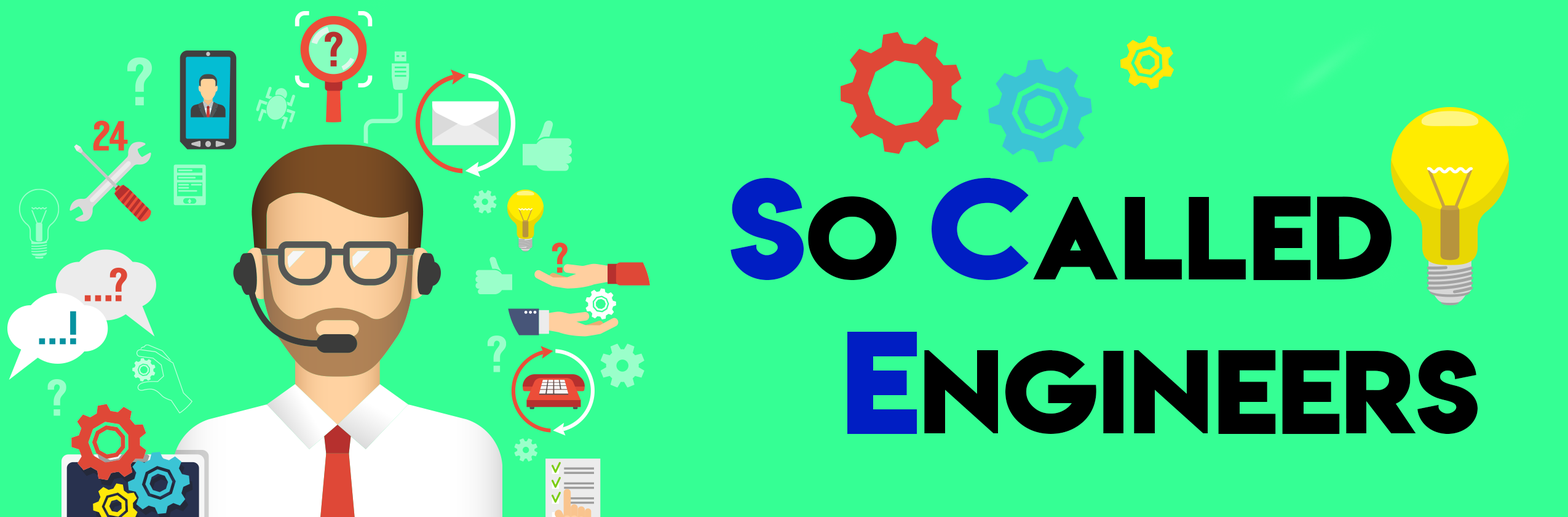
<style>
.page{position:relative;width:1568px;height:517px;background:#35ff94}
.page>*{position:absolute;margin:0}
.t1{font:105px "LemonMilkbold";color:#000000}
.t2{font:128.1px "LemonMilkbold";color:#001ec3}
</style>
<div class="page">
<p class="t1" style="left:731px;top:178px;width:747px;height:256px"><span class="t2">s</span>o <span class="t2">c</span>alled<br><span class="t2">   e</span>ngineers</p>
</div>
